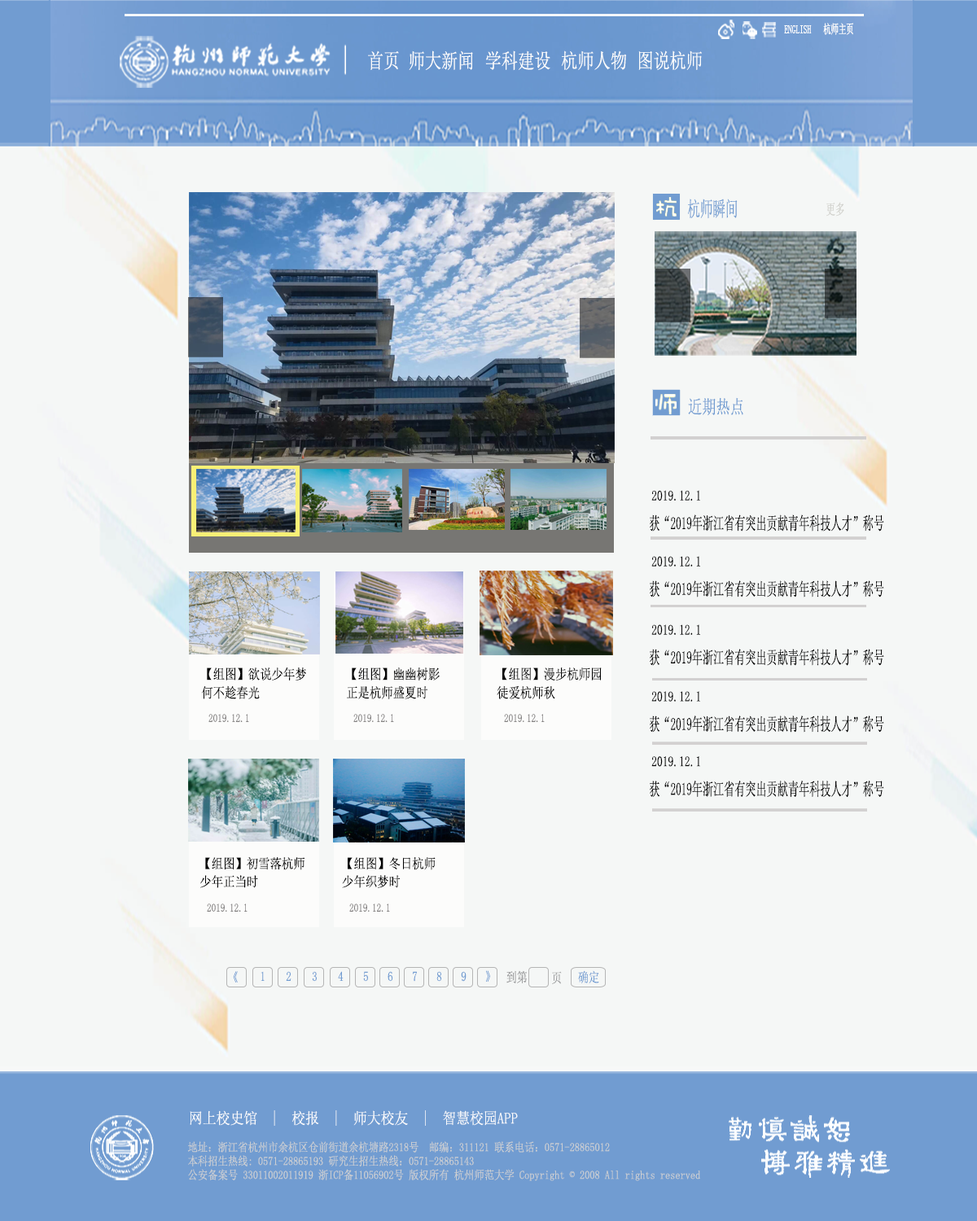
<style>
.page{position:relative;width:977px;height:1221px;background:#f5f7f6}
.page>*{position:absolute;margin:0}
.t1{font:12.6px "LiSu";color:#fefefd;scale:0.61 1}
.t2{font:12.6px "SimSun";color:#fefefd;scale:0.61 1}
.t3{font:20.5px "SimSun";color:#fefefd;scale:0.8 1}
.t4{font:20.8px "SimSun";color:#719cd1;scale:0.61 1}
.t5{font:14.7px "SimSun";color:#d0d0cb;scale:0.64 1}
.t6{font:18.7px "SimSun";color:#719cd1;scale:0.75 1}
.t7{font:14.3px "SimSun";color:#020202;scale:0.77 1}
.t8{font:17.5px "SimSun";color:#040404;scale:0.61 1}
.t9{font:13.9px/18.6px "SimSun";color:#010101;scale:0.84 1}
.t10{font:11.4px "SimSun";color:#838181;scale:0.8 1}
.t11{font:13.5px/18px "SimSun";color:#010101;scale:0.87 1}
.t12{font:13.4px "SimSun";scale:0.8 1}
.t13{font:13.4px "SimSun";color:#719cd1;scale:0.8 1}
.t14{font:13.4px "SimSun";color:#9d9e9f;scale:0.8 1}
.t15{font:15.5px "SimSun";color:#f9fafc;scale:0.89 1}
.t16{font:11.8px/13.9px "SimSun";color:#cccfd2;scale:0.85 1}
</style>
<div class="page">
<p class="t1" style="left:784px;top:25px;width:27px;height:8px">ENGLISH</p>
<p class="t2" style="left:823px;top:23px;width:30px;height:12px">杭师主页</p>
<p class="t3" style="left:368px;top:50px;width:31px;height:20px">首页</p>
<p class="t3" style="left:409px;top:50px;width:64px;height:20px">师大新闻</p>
<p class="t3" style="left:485px;top:50px;width:65px;height:21px">学科建设</p>
<p class="t3" style="left:561px;top:50px;width:66px;height:20px">杭师人物</p>
<p class="t3" style="left:638px;top:50px;width:64px;height:20px">图说杭师</p>
<p class="t4" style="left:688px;top:199px;width:49px;height:20px">杭师瞬间</p>
<p class="t5" style="left:826px;top:202px;width:18px;height:15px">更多</p>
<p class="t6" style="left:688px;top:397px;width:55px;height:19px">近期热点</p>
<p class="t7" style="left:651px;top:490px;width:49px;height:11px">2019.12.1</p>
<p class="t8" style="left:650px;top:514px;width:234px;height:17px">获“2019年浙江省有突出贡献青年科技人才”称号</p>
<p class="t7" style="left:651px;top:556px;width:49px;height:10px">2019.12.1</p>
<p class="t8" style="left:650px;top:580px;width:234px;height:17px">获“2019年浙江省有突出贡献青年科技人才”称号</p>
<p class="t7" style="left:651px;top:624px;width:49px;height:11px">2019.12.1</p>
<p class="t8" style="left:650px;top:649px;width:234px;height:17px">获“2019年浙江省有突出贡献青年科技人才”称号</p>
<p class="t9" style="left:202px;top:667px;width:104px;height:32px">【组图】欲说少年梦 <br>何不趁春光</p>
<p class="t9" style="left:347px;top:667px;width:93px;height:32px">【组图】幽幽树影 <br>正是杭师盛夏时</p>
<p class="t9" style="left:496px;top:667px;width:105px;height:32px">【组图】漫步杭师园 <br>徒爱杭师秋</p>
<p class="t7" style="left:651px;top:691px;width:49px;height:11px">2019.12.1</p>
<p class="t10" style="left:208px;top:714px;width:41px;height:8px">2019.12.1</p>
<p class="t10" style="left:353px;top:714px;width:41px;height:8px">2019.12.1</p>
<p class="t10" style="left:504px;top:714px;width:41px;height:8px">2019.12.1</p>
<p class="t8" style="left:650px;top:715px;width:234px;height:18px">获“2019年浙江省有突出贡献青年科技人才”称号</p>
<p class="t7" style="left:651px;top:756px;width:49px;height:11px">2019.12.1</p>
<p class="t8" style="left:650px;top:781px;width:234px;height:17px">获“2019年浙江省有突出贡献青年科技人才”称号</p>
<p class="t11" style="left:200px;top:857px;width:105px;height:31px">【组图】初雪落杭师<br>少年正当时</p>
<p class="t11" style="left:342px;top:857px;width:93px;height:31px">【组图】冬日杭师<br>少年织梦时</p>
<p class="t10" style="left:207px;top:903px;width:40px;height:9px">2019.12.1</p>
<p class="t10" style="left:349px;top:903px;width:41px;height:9px">2019.12.1</p>
<p class="t12" style="left:233px;top:971px;width:5px;height:11px">《</p>
<p class="t13" style="left:260px;top:971px;width:5px;height:10px">1</p>
<p class="t13" style="left:286px;top:971px;width:5px;height:10px">2</p>
<p class="t13" style="left:312px;top:971px;width:5px;height:11px">3</p>
<p class="t13" style="left:338px;top:971px;width:5px;height:10px">4</p>
<p class="t13" style="left:363px;top:971px;width:5px;height:11px">5</p>
<p class="t13" style="left:387px;top:971px;width:6px;height:11px">6</p>
<p class="t13" style="left:412px;top:971px;width:5px;height:11px">7</p>
<p class="t13" style="left:436px;top:971px;width:6px;height:11px">8</p>
<p class="t13" style="left:461px;top:971px;width:5px;height:11px">9</p>
<p class="t13" style="left:486px;top:970px;width:4px;height:12px">》</p>
<p class="t14" style="left:506px;top:970px;width:21px;height:13px">到第</p>
<p class="t14" style="left:552px;top:971px;width:10px;height:13px">页</p>
<p class="t13" style="left:578px;top:970px;width:21px;height:13px">确定</p>
<p class="t15" style="left:190px;top:1110px;width:328px;height:16px">网上校史馆  |  校报  |  师大校友  |  智慧校园APP</p>
<p class="t16" style="left:187px;top:1141px;width:513px;height:40px">地址：浙江省杭州市余杭区仓前街道余杭塘路2318号　邮编：311121 联系电话：0571-28865012<br>本科招生热线: 0571-28865193 研究生招生热线：0571-28865143<br>公安备案号 33011002011919 浙ICP备11056902号 版权所有 杭州师范大学 Copyright © 2008 All rights reserved</p>
</div>
